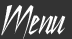
<style>
.page{position:relative;width:72px;height:39px;background:#333333}
.page>*{position:absolute;margin:0}
.t1{font:37.9px "StillTime-Regular";color:#ffffff}
</style>
<div class="page">
<p class="t1" style="left:1px;top:5px;width:65px;height:34px">Menu</p>
</div>
